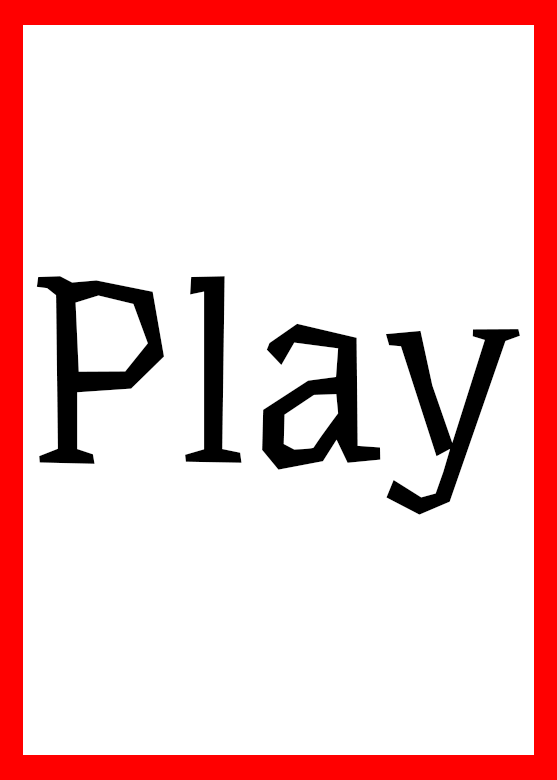
<style>
.page{position:relative;width:557px;height:780px;background:#ffffff}
.page>*{position:absolute;margin:0}
.t1{font:262.9px "Underdog-Regular";color:#000000}
</style>
<div class="page">
<p class="t1" style="left:36px;top:276px;width:484px;height:239px">Play</p>
</div>
